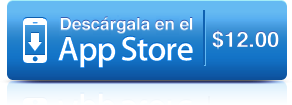
<style>
.page{position:relative;width:292px;height:105px}
.page>*{position:absolute;margin:0}
.t1{font:17px "Helvetica-Bold"}
.t2{font:22px "Helvetica-Bold";color:#ffffff}
</style>
<div class="page">
<p class="t1" style="left:60px;top:16px;width:133px;height:17px">Descárgala en el</p>
<p class="t2" style="left:212px;top:29px;width:67px;height:21px">$12.00</p>
</div>
